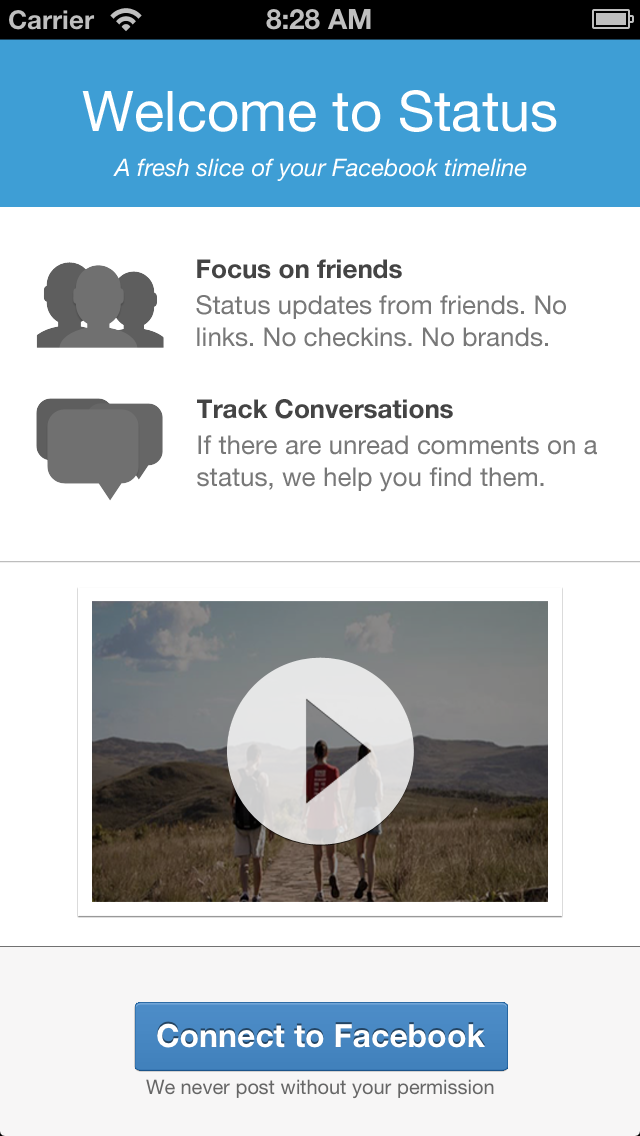
<style>
.page{position:relative;width:640px;height:1136px;background:#ffffff}
.page>*{position:absolute;margin:0}
.t1{font:56px "HelveticaNeue";color:#ffffff}
.t2{font:24px "HelveticaNeue-Italic";color:#ffffff}
.t3{font:26px "HelveticaNeue-Bold";color:#444444}
.t4{font:26px "HelveticaNeue";color:#787878}
</style>
<div class="page">
<p class="t1" style="left:82px;top:90px;width:475px;height:42px">Welcome to Status</p>
<p class="t2" style="left:113px;top:158px;width:414px;height:23px">A fresh slice of your Facebook timeline</p>
<p class="t3" style="left:197px;top:259px;width:205px;height:20px">Focus on friends</p>
<p class="t4" style="left:196px;top:295px;width:370px;height:52px">Status updates from friends. No links. No checkins. No brands.</p>
<p class="t3" style="left:197px;top:399px;width:256px;height:20px">Track Conversations</p>
<p class="t4" style="left:197px;top:435px;width:400px;height:57px">If there are unread comments on a status, we help you find them.</p>
</div>
